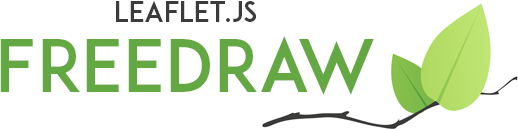
<style>
.page{position:relative;width:518px;height:129px;background:#ffffff}
.page>*{position:absolute;margin:0}
.t1{font:28px/70px "ADAM.CGPRO";color:#3b3b3a}
.t2{font:72px/70px "ADAM.CGPRO";color:#64a843}
</style>
<div class="page">
<p class="t1" style="left:0px;top:0px;width:374px;height:95px;text-align:center">Leaflet.js<br><span class="t2">Freedraw</span></p>
</div>
